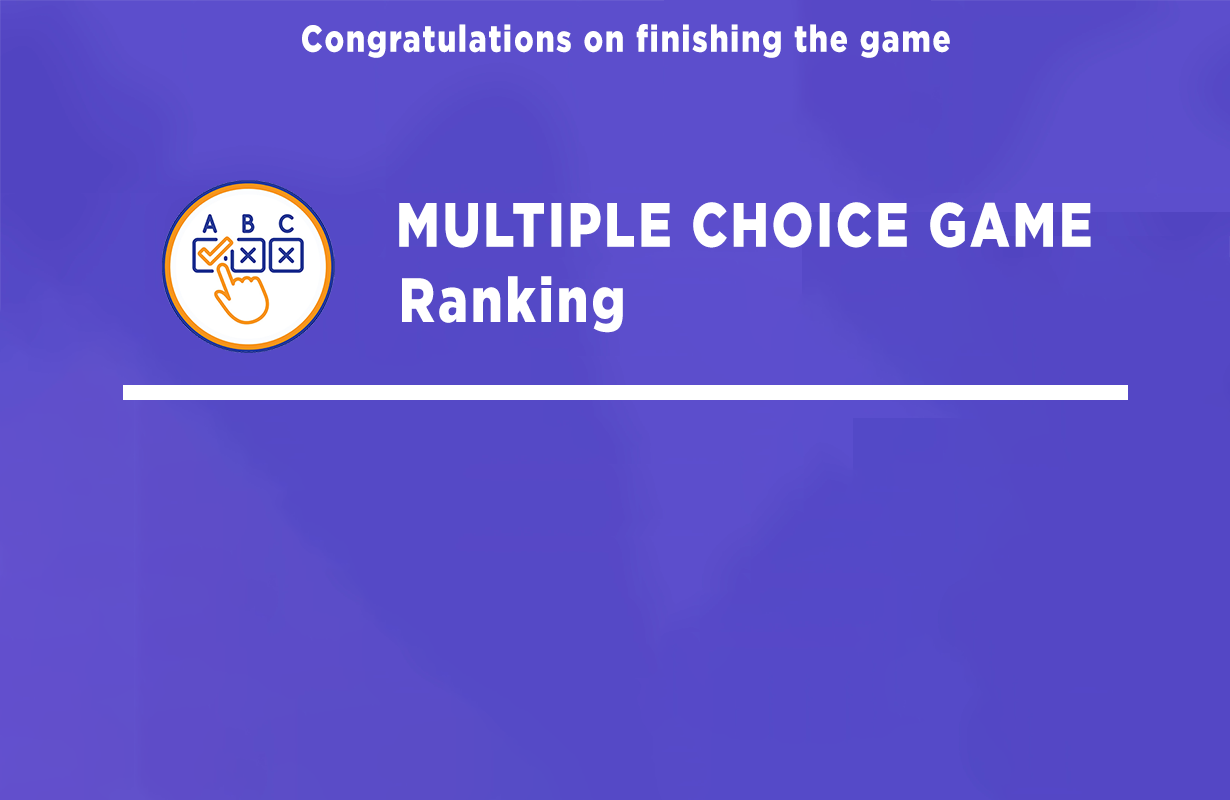
<style>
.page{position:relative;width:1230px;height:800px}
.page>*{position:absolute;margin:0}
.t1{font:37.5px "SVN-GothamBlack";letter-spacing:0.06em;color:#ffffff;scale:0.8 1}
.t2{font:62.5px "SVN-GothamBlack";letter-spacing:0.06em;color:#ffffff;scale:0.8 1}
</style>
<div class="page">
<p class="t1" style="left:302px;top:24px;width:648px;height:34px">Congratulations on finishing the game</p>
<p class="t2" style="left:399px;top:202px;width:692px;height:46px">MULTIPLE CHOICE GAME</p>
<p class="t2" style="left:402px;top:276px;width:221px;height:57px">Ranking</p>
</div>
